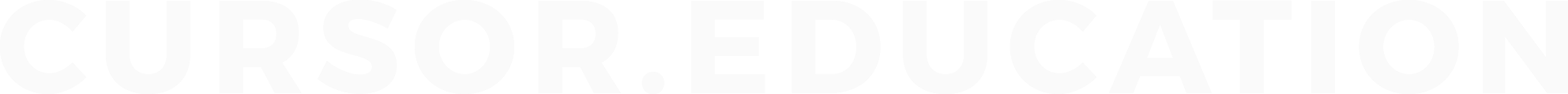
<style>
.page{position:relative;width:1568px;height:94px;background:#ffffff}
.page>*{position:absolute;margin:0}
.t1{font:131.6px "Montserrat-Bold";letter-spacing:0.1em;color:#fafafa;text-transform:uppercase}
</style>
<div class="page">
<p class="t1" style="left:0px;top:0px;width:1568px;height:94px">Cursor.education</p>
</div>
